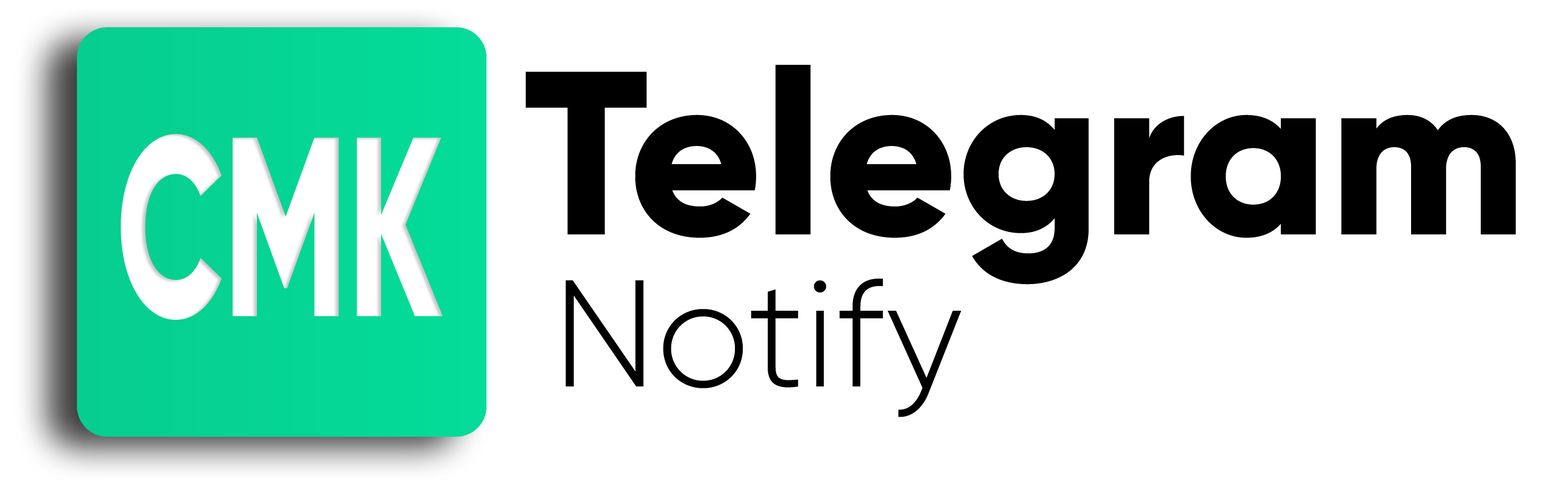
<style>
.page{position:relative;width:1568px;height:487px;background:#ffffff}
.page>*{position:absolute;margin:0}
.t1{font:232.3px "Gilroy-ExtraBold";color:#000000}
.t2{font:255.1px "Gilroy-ExtraBold";color:#ffffff;scale:0.59 1}
.t3{font:151.5px "Gilroy-Light";color:#000000}
</style>
<div class="page">
<p class="t1" style="left:525px;top:65px;width:991px;height:220px">Telegram</p>
<p class="t2" style="left:121px;top:134px;width:322px;height:186px">CMK</p>
<p class="t3" style="left:565px;top:279px;width:397px;height:138px">Notify</p>
</div>
